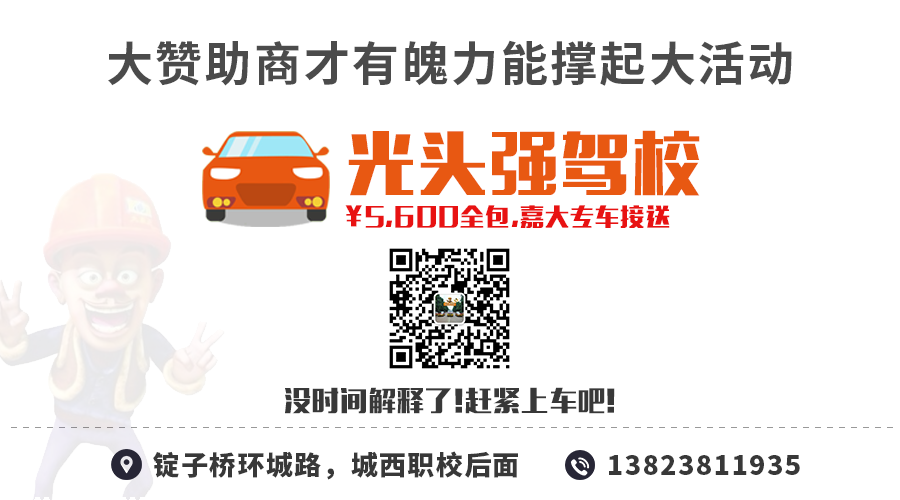
<style>
.page{position:relative;width:900px;height:500px;background:#ffffff}
.page>*{position:absolute;margin:0}
.t1{font:47px "SourceHanSansCN-Bold";letter-spacing:0.05em;color:#4b4b4b}
.t2{font:68px "MFLiHei_Noncommercial-Regular";letter-spacing:0.05em;color:#e85812}
.t3{font:24px "MFLiHei_Noncommercial-Regular";letter-spacing:0.05em;color:#e81212}
.t4{font:27px "MFLiHei_Noncommercial-Regular";letter-spacing:0.05em;color:#383838}
.t5{font:27px "SourceHanSansCN-Heavy";letter-spacing:0.05em;color:#383838}
</style>
<div class="page">
<p class="t1" style="left:108px;top:40px;width:684px;height:46px">大赞助商才有魄力能撑起大活动</p>
<p class="t2" style="left:348px;top:130px;width:352px;height:66px">光头强驾校</p>
<p class="t3" style="left:345px;top:205px;width:325px;height:23px">¥5,600全包,嘉大专车接送</p>
<p class="t4" style="left:285px;top:387px;width:330px;height:27px">没时间解释了!赶紧上车吧!</p>
<p class="t5" style="left:153px;top:451px;width:365px;height:29px">锭子桥环城路，城西职校后面</p>
<p class="t5" style="left:609px;top:455px;width:191px;height:20px">13823811935</p>
</div>
